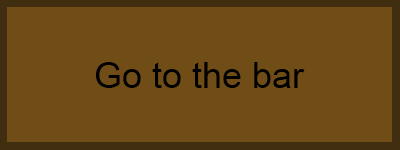
<style>
.page{position:relative;width:400px;height:150px;background:#704c16}
.page>*{position:absolute;margin:0}
.t1{font:36px "ArialMT";color:#000000}
</style>
<div class="page">
<p class="t1" style="left:95px;top:62px;width:210px;height:26px">Go to the bar</p>
</div>
